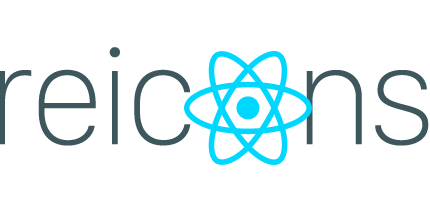
<style>
.page{position:relative;width:430px;height:211px;background:#ffffff}
.page>*{position:absolute;margin:0}
.t1{font:144.3px "SanFranciscoDisplay-Thin";letter-spacing:-0.031em;color:#3e575c}
</style>
<div class="page">
<p class="t1" style="left:0px;top:47px;width:429px;height:99px">reic    ns</p>
</div>
